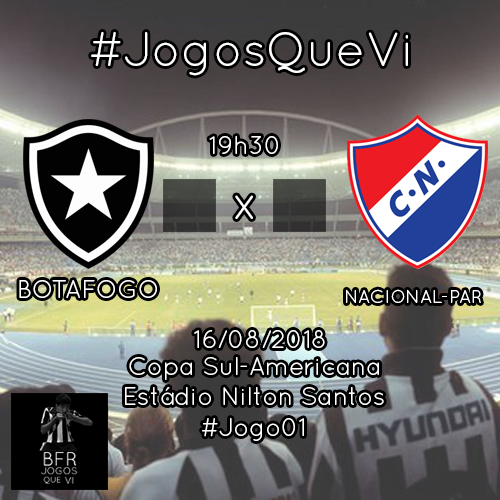
<style>
.page{position:relative;width:500px;height:500px}
.page>*{position:absolute;margin:0}
.t1{font:48px "QuicksandBook-Regular";color:#ffffff}
.t2{font:25px "QuicksandBook-Regular";color:#ffffff}
.t3{font:18.4px "QuicksandBook-Regular";color:#ffffff}
</style>
<div class="page">
<p class="t1" style="left:91px;top:32px;width:317px;height:44px">#JogosQueVi</p>
<p class="t2" style="left:209px;top:136px;width:69px;height:18px">19h30</p>
<p class="t1" style="left:235px;top:195px;width:18px;height:24px">x</p>
<p class="t2" style="left:19px;top:280px;width:138px;height:18px">BOTAFOGO</p>
<p class="t3" style="left:346px;top:289px;width:135px;height:14px">NACIONAL-PAR</p>
<p class="t2" style="left:194px;top:330px;width:131px;height:18px">16/08/2018</p>
<p class="t2" style="left:129px;top:357px;width:250px;height:23px">Copa Sul-Americana</p>
<p class="t2" style="left:125px;top:387px;width:259px;height:18px">Estádio Nilton Santos</p>
<p class="t2" style="left:202px;top:418px;width:102px;height:23px">#Jogo01</p>
</div>
